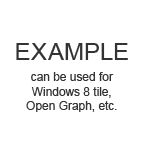
<style>
.page{position:relative;width:144px;height:144px;background:#ffffff}
.page>*{position:absolute;margin:0}
.t1{font:12px "ArialMT";color:#333333}
.t2{font:24px "ArialMT";color:#333333}
</style>
<div class="page">
<p class="t1" style="left:16px;top:43px;width:112px;height:69px;text-align:center"><span class="t2">EXAMPLE<br></span>can be used for<br>Windows 8 tile,<br>Open Graph, etc.</p>
</div>
